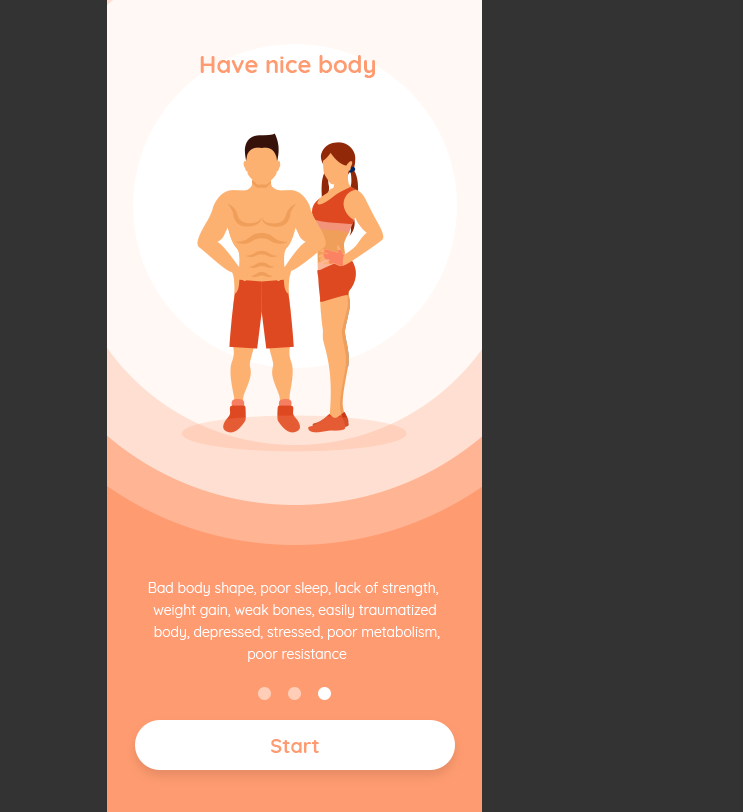
<style>
.page{position:relative;width:743px;height:812px;background:#333333}
.page>*{position:absolute;margin:0}
.t1{font:24px "Quicksand-Bold";color:#ff9b70}
.t2{font:14px/22px "Quicksand-Regular";color:#ffffff}
.t3{font:20px "Quicksand-Bold";color:#ff9b70}
</style>
<div class="page">
<p class="t1" style="left:200px;top:55px;width:175px;height:23px">Have nice body</p>
<p class="t2" style="left:148px;top:582px;width:292px;height:80px;text-align:center">Bad body shape, poor sleep, lack of strength, <br>weight gain, weak bones, easily traumatized<br> body, depressed, stressed, poor metabolism,<br> poor resistance</p>
<p class="t3" style="left:271px;top:739px;width:48px;height:14px">Start</p>
</div>
